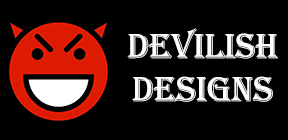
<style>
.page{position:relative;width:288px;height:140px;background:#000000}
.page>*{position:absolute;margin:0}
.t1{font:36px "Algerian";color:#ffffff}
</style>
<div class="page">
<p class="t1" style="left:127px;top:28px;width:151px;height:74px;text-align:center">DEVILISH<br>dESIGNS</p>
</div>
